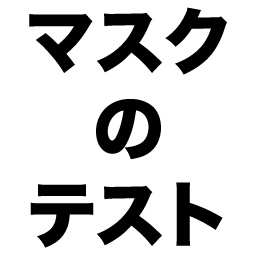
<style>
.page{position:relative;width:256px;height:256px;background:#ffffff}
.page>*{position:absolute;margin:0}
.t1{font:72px "HiraginoSans-W8";letter-spacing:0.05em;color:#000000}
</style>
<div class="page">
<p class="t1" style="left:29px;top:7px;width:198px;height:241px;text-align:center">マスク<br>の<br>テスト</p>
</div>
